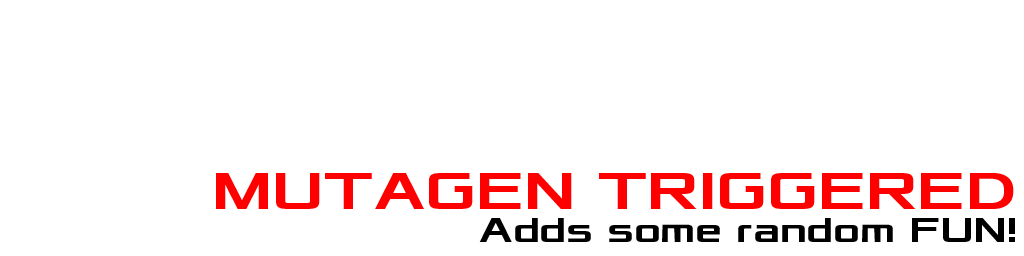
<style>
.page{position:relative;width:1024px;height:256px;background:#ffffff}
.page>*{position:absolute;margin:0}
.t1{font:55px "Xolonium-Bold";color:#ff0000}
.t2{font:36px "Xolonium-Bold";color:#000000}
</style>
<div class="page">
<p class="t1" style="left:216px;top:173px;width:798px;height:36px">MUTAGEN TRIGGERED</p>
<p class="t2" style="left:479px;top:218px;width:536px;height:24px">Adds some random FUN!</p>
</div>
